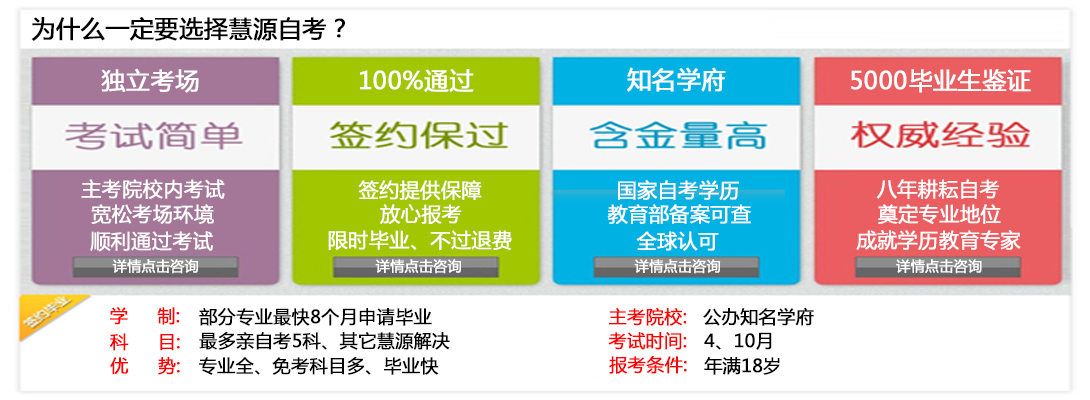
<style>
.page{position:relative;width:1090px;height:400px;background:#ffffff}
.page>*{position:absolute;margin:0}
.t1{font:24px "MicrosoftYaHei";color:#000000;font-weight:bold}
.t2{font:24px "MicrosoftYaHei";color:#ffffff;font-weight:bold}
.t3{font:20px "MicrosoftYaHei";color:#ffffff;font-weight:bold}
.t4{font:14px "MicrosoftYaHei";color:#ffffff;font-weight:bold}
.t5{font:18px "MicrosoftYaHei";color:#ff0000;font-weight:bold}
.t6{font:18px "MicrosoftYaHei";color:#000000;font-weight:bold}
</style>
<div class="page">
<p class="t1" style="left:31px;top:17px;width:314px;height:24px">为什么一定要选择慧源自考？</p>
<p class="t2" style="left:101px;top:68px;width:98px;height:25px">独立考场</p>
<p class="t2" style="left:360px;top:69px;width:114px;height:23px">100%通过</p>
<p class="t2" style="left:627px;top:67px;width:99px;height:25px">知名学府</p>
<p class="t2" style="left:851px;top:69px;width:180px;height:24px">5000毕业生鉴证</p>
<p class="t3" style="left:81px;top:179px;width:144px;height:20px">主考院校内考试</p>
<p class="t3" style="left:358px;top:180px;width:124px;height:20px">签约提供保障</p>
<p class="t3" style="left:618px;top:180px;width:121px;height:21px">国家自考学历</p>
<p class="t3" style="left:876px;top:179px;width:123px;height:20px">八年耕耘自考</p>
<p class="t3" style="left:91px;top:204px;width:123px;height:20px">宽松考场环境</p>
<p class="t3" style="left:380px;top:204px;width:82px;height:20px">放心报考</p>
<p class="t3" style="left:607px;top:204px;width:144px;height:20px">教育部备案可查</p>
<p class="t3" style="left:878px;top:204px;width:123px;height:20px">奠定专业地位</p>
<p class="t3" style="left:90px;top:231px;width:123px;height:21px">顺利通过考试</p>
<p class="t3" style="left:328px;top:230px;width:184px;height:20px">限时毕业、不过退费</p>
<p class="t3" style="left:636px;top:231px;width:83px;height:20px">全球认可</p>
<p class="t3" style="left:856px;top:230px;width:165px;height:21px">成就学历教育专家</p>
<p class="t4" style="left:112px;top:259px;width:87px;height:15px">详情点击咨询</p>
<p class="t4" style="left:375px;top:259px;width:87px;height:15px">详情点击咨询</p>
<p class="t4" style="left:634px;top:259px;width:87px;height:15px">详情点击咨询</p>
<p class="t4" style="left:896px;top:259px;width:86px;height:15px">详情点击咨询</p>
<p class="t5" style="left:110px;top:307px;width:70px;height:18px">学     制:</p>
<p class="t6" style="left:199px;top:308px;width:233px;height:18px">部分专业最快8个月申请毕业</p>
<p class="t5" style="left:609px;top:307px;width:78px;height:19px">主考院校:</p>
<p class="t6" style="left:703px;top:307px;width:111px;height:19px">公办知名学府</p>
<p class="t5" style="left:110px;top:333px;width:70px;height:18px">科     目:</p>
<p class="t6" style="left:199px;top:332px;width:251px;height:18px">最多亲自考5科、其它慧源解决</p>
<p class="t5" style="left:608px;top:332px;width:79px;height:18px">考试时间:</p>
<p class="t6" style="left:704px;top:332px;width:68px;height:18px">4、10月</p>
<p class="t5" style="left:110px;top:357px;width:70px;height:18px">优     势:</p>
<p class="t6" style="left:199px;top:357px;width:240px;height:18px">专业全、免考科目多、毕业快</p>
<p class="t5" style="left:609px;top:356px;width:78px;height:18px">报考条件:</p>
<p class="t6" style="left:704px;top:357px;width:76px;height:18px">年满18岁</p>
</div>
